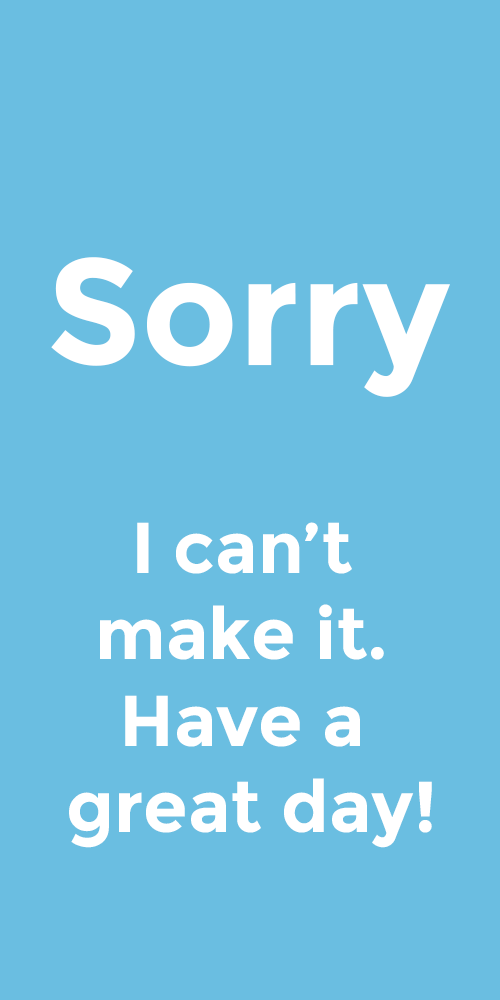
<style>
.page{position:relative;width:500px;height:1000px;background:#6abee1}
.page>*{position:absolute;margin:0}
.t1{font:150px "Montserrat-Bold";color:#ffffff}
.t2{font:72px "Montserrat-Bold";color:#ffffff}
</style>
<div class="page">
<p class="t1" style="left:51px;top:257px;width:399px;height:140px">Sorry</p>
<p class="t2" style="left:69px;top:522px;width:363px;height:326px;text-align:center">I can’t <br>make it. <br>Have a <br>great day!</p>
</div>
